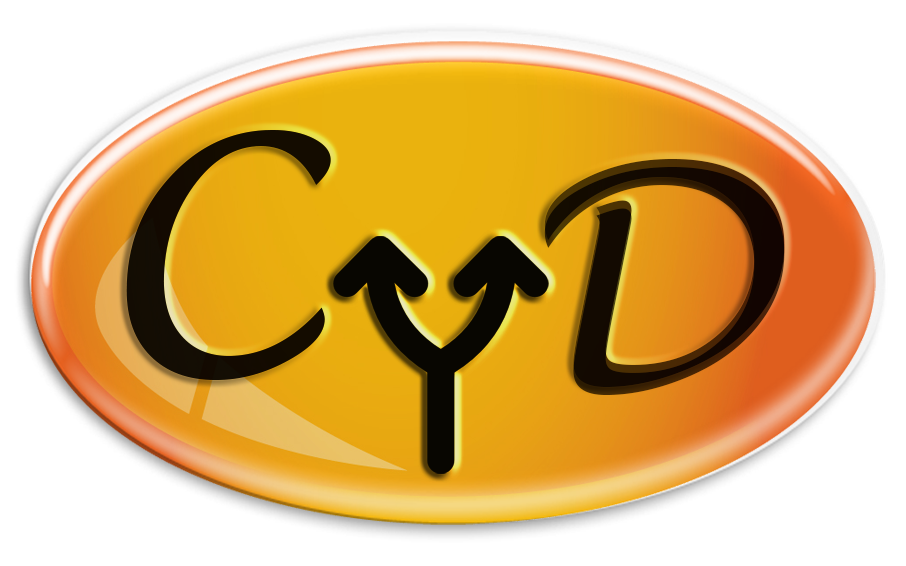
<style>
.page{position:relative;width:906px;height:566px;background:#ffffff}
.page>*{position:absolute;margin:0}
.t1{font:329.4px "LucidaHandwriting-Italic";color:#000000}
.t2{font:290.8px "LucidaHandwriting-Italic";color:#000000}
</style>
<div class="page">
<p class="t1" style="left:126px;top:130px;width:205px;height:250px;opacity:0.81">C</p>
<p class="t1" style="left:126px;top:130px;width:205px;height:250px;opacity:0.81">C</p>
<p class="t2" style="left:544px;top:159px;width:241px;height:228px;opacity:0.81">D</p>
<p class="t2" style="left:544px;top:167px;width:241px;height:228px;opacity:0.81">D</p>
</div>
